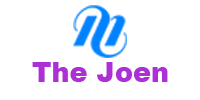
<style>
.page{position:relative;width:200px;height:100px;background:#ffffff}
.page>*{position:absolute;margin:0}
.t1{font:28.3px "Arial-Black";color:#ad2fd6;scale:0.96 1}
</style>
<div class="page">
<p class="t1" style="left:32px;top:62px;width:136px;height:20px">The Joen</p>
</div>
